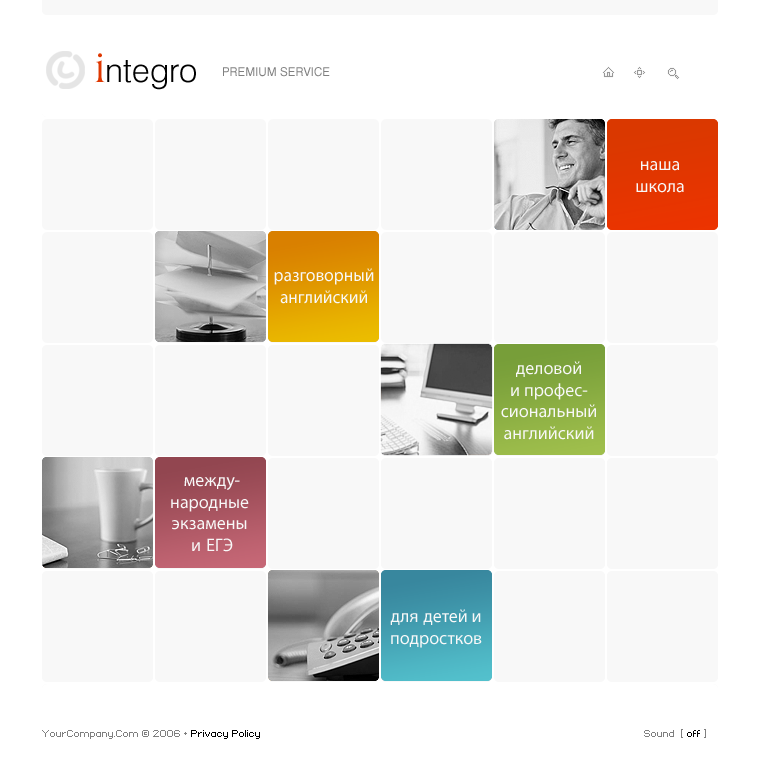
<style>
.page{position:relative;width:766px;height:780px;background:#f8f8f8}
.page>*{position:absolute;margin:0}
.t1{font:33px "Swiss721BT-Light";color:#000000}
.t2{font:41.2px "AmericanaBT-Roman";color:#de3700}
.t3{font:12px "Swiss721BT-Roman";color:#7f7f7f;text-transform:uppercase}
.t4{font:18px "MyriadPro-Regular";color:#f8f8f8}
.t5{font:18px "MyriadPro-Regular";color:#f8f8f8;scale:0.97 1}
.t6{font:8px "Standard0753";color:#7f7f7f}
.t7{font:8px "Standard0753";color:#000000}
</style>
<div class="page">
<p class="t1" style="left:95px;top:53px;width:101px;height:37px"><span class="t2">i</span>ntegro</p>
<p class="t3" style="left:223px;top:67px;width:107px;height:10px">premium service</p>
<p class="t4" style="left:636px;top:161px;width:48px;height:32px;text-align:center">наша<br>школа</p>
<p class="t5" style="left:274px;top:268px;width:100px;height:36px;text-align:center">разговорный<br>английский</p>
<p class="t4" style="left:501px;top:361px;width:95px;height:79px;text-align:center">деловой<br>и профес-<br>сиональный<br>английский</p>
<p class="t4" style="left:171px;top:477px;width:78px;height:75px;text-align:center">между-<br>народные <br>экзамены <br>и ЕГЭ</p>
<p class="t4" style="left:390px;top:609px;width:92px;height:39px;text-align:center">для детей и<br>подростков</p>
<p class="t6" style="left:42px;top:730px;width:218px;height:9px">YourCompany.Com © 2006 •<span class="t7"> Privacy Policy</span></p>
<p class="t6" style="left:644px;top:729px;width:62px;height:9px">Sound  [ <span class="t7">off</span> ]</p>
</div>
